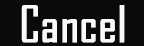
<style>
.page{position:relative;width:144px;height:46px;background:#0a0a0a}
.page>*{position:absolute;margin:0}
.t1{font:48px "AgencyFB-Reg";color:#faf9f7;font-weight:bold}
</style>
<div class="page">
<p class="t1" style="left:21px;top:5px;width:104px;height:38px">Cancel</p>
</div>
